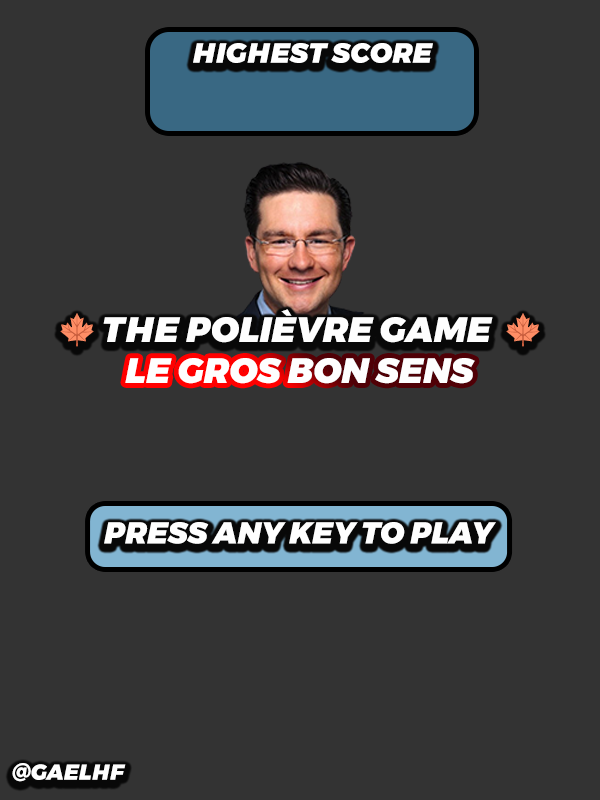
<style>
.page{position:relative;width:600px;height:800px;background:#333333}
.page>*{position:absolute;margin:0}
.t1{font:27.8px "Montserrat-BlackItalic";letter-spacing:0.005em;color:#ffffff;text-transform:uppercase}
.t2{font:34.9px "Montserrat-BlackItalic";letter-spacing:0.005em;color:#fefefe;text-transform:uppercase}
.t3{font:34.9px "EmojiOneColor";letter-spacing:0.005em;color:#fefefe;text-transform:uppercase}
.t4{font:30px "Montserrat-BlackItalic";letter-spacing:0.005em;color:#fefefe;text-transform:uppercase}
.t5{font:21.4px "Montserrat-BlackItalic";letter-spacing:0.005em;color:#fefefe;text-transform:uppercase}
</style>
<div class="page">
<p class="t1" style="left:193px;top:43px;width:240px;height:20px">HIGHEST SCORE</p>
<p class="t2" style="left:60px;top:309px;width:480px;height:38px"><span class="t3">🍁 </span>THE POLIÈVRE GAME  <span class="t3">🍁</span></p>
<p class="t2" style="left:125px;top:358px;width:350px;height:26px">LE GROS BON SENS</p>
<p class="t4" style="left:104px;top:522px;width:392px;height:22px">PRESS ANY KEY TO PLAY</p>
<p class="t5" style="left:12px;top:763px;width:114px;height:19px">@Gaelhf</p>
</div>
